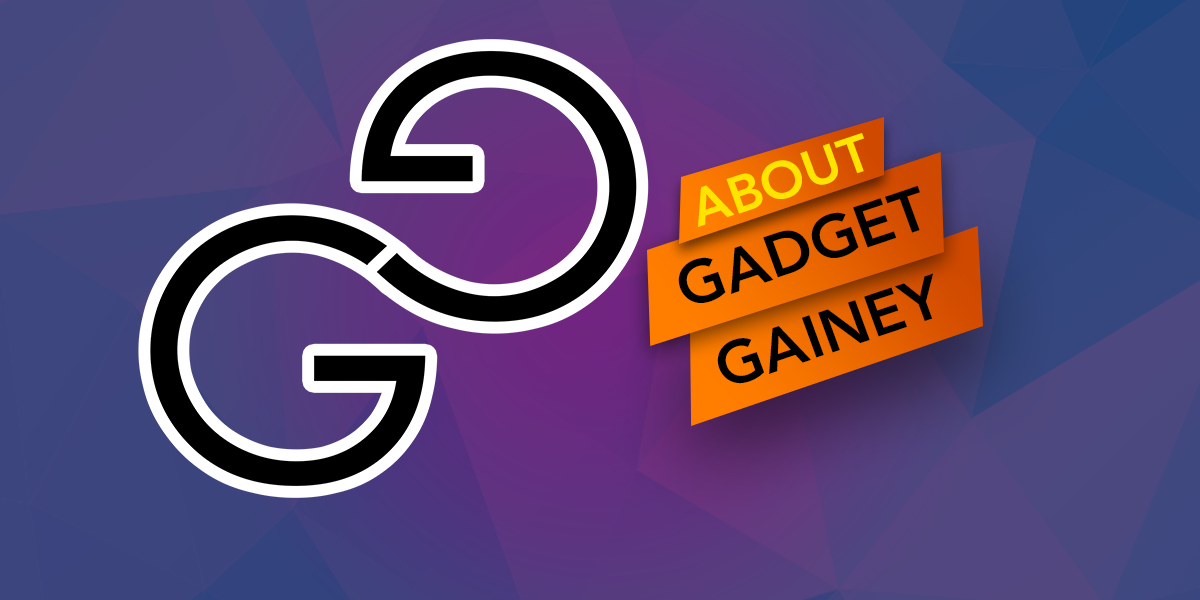
<style>
.page{position:relative;width:1200px;height:600px}
.page>*{position:absolute;margin:0}
.t1{font:51.5px "Avenir-Heavy";color:#ffe400;scale:1.03 1}
.t2{font:60px "Avenir-Heavy";color:#000000;scale:1.03 1}
.t3{font:59.5px "Avenir-Heavy";color:#000000;scale:1.03 1}
</style>
<div class="page">
<p class="t1" style="left:698px;top:133px;width:166px;height:94px;rotate:-19deg">ABOUT</p>
<p class="t2" style="left:678px;top:185px;width:242px;height:118px;rotate:-19deg">GADGET</p>
<p class="t3" style="left:717px;top:273px;width:216px;height:111px;rotate:-19deg">GAINEY</p>
</div>
